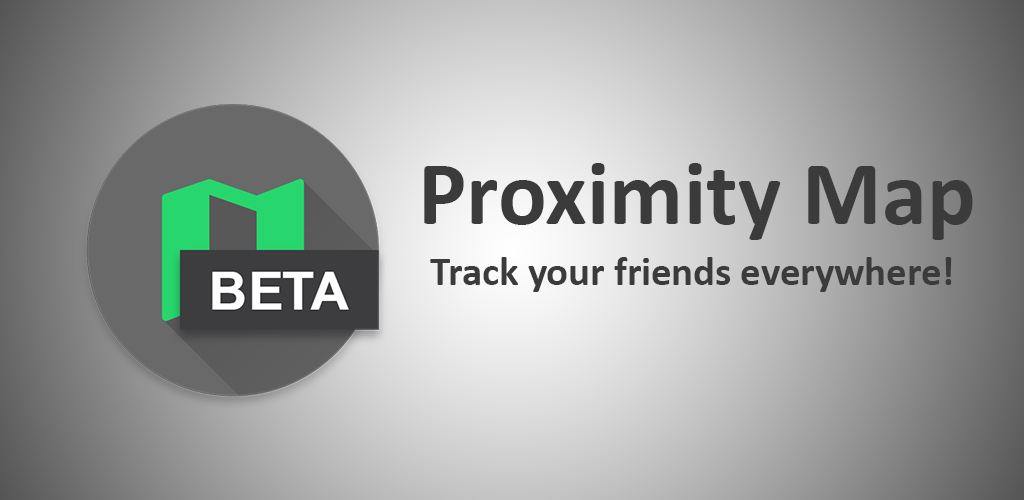
<style>
.page{position:relative;width:1024px;height:500px}
.page>*{position:absolute;margin:0}
.t1{font:91.4px "Calibri-Bold";color:#3b3b3b}
.t2{font:40.6px "Calibri-Bold";color:#3b3b3b}
</style>
<div class="page">
<p class="t1" style="left:424px;top:163px;width:549px;height:77px">Proximity Map</p>
<p class="t2" style="left:430px;top:257px;width:522px;height:35px">Track your friends everywhere!</p>
</div>
